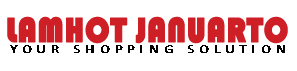
<style>
.page{position:relative;width:297px;height:71px;background:#ffffff}
.page>*{position:absolute;margin:0}
.t1{font:36px "Bauhaus93";color:#cd1f25;text-transform:uppercase;font-weight:bold;scale:0.89 1}
.t2{font:11.6px "Calibri";letter-spacing:0.3em;color:#000000;text-transform:uppercase;font-weight:bold;scale:1.2 1}
</style>
<div class="page">
<p class="t1" style="left:7px;top:16px;width:281px;height:28px">LAMHOT JANUARTO</p>
<p class="t2" style="left:10px;top:45px;width:275px;height:8px">Your shopping solution</p>
</div>
